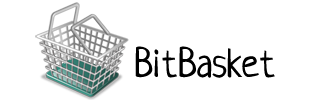
<style>
.page{position:relative;width:312px;height:100px;background:#ffffff}
.page>*{position:absolute;margin:0}
.t1{font:40.7px "Neucha";color:#000000}
</style>
<div class="page">
<p class="t1" style="left:135px;top:46px;width:140px;height:32px">BitBasket</p>
</div>
